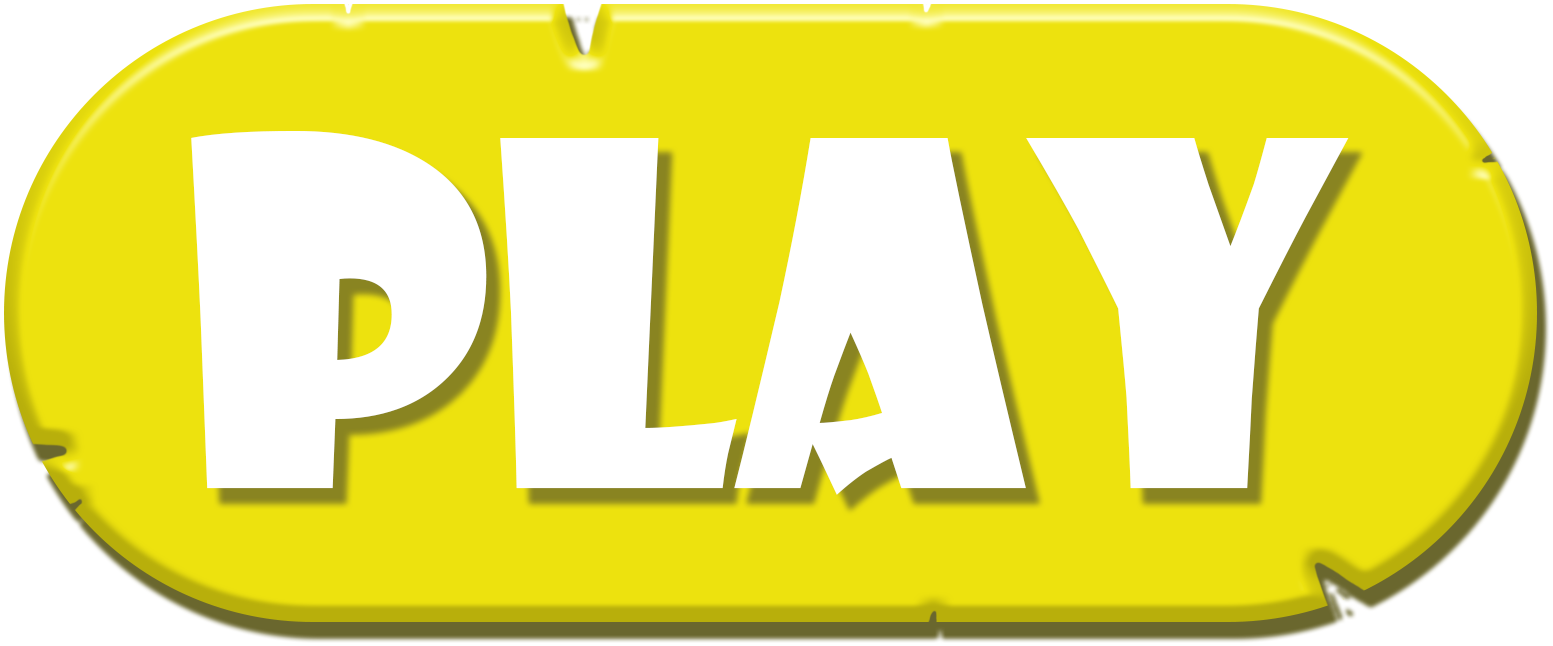
<style>
.page{position:relative;width:1553px;height:646px;background:#ede20e}
.page>*{position:absolute;margin:0}
.t1{font:465.7px "ShowcardGothic-Reg";color:#ffffff}
</style>
<div class="page">
<p class="t1" style="left:191px;top:131px;width:1158px;height:364px">PLAY</p>
</div>
